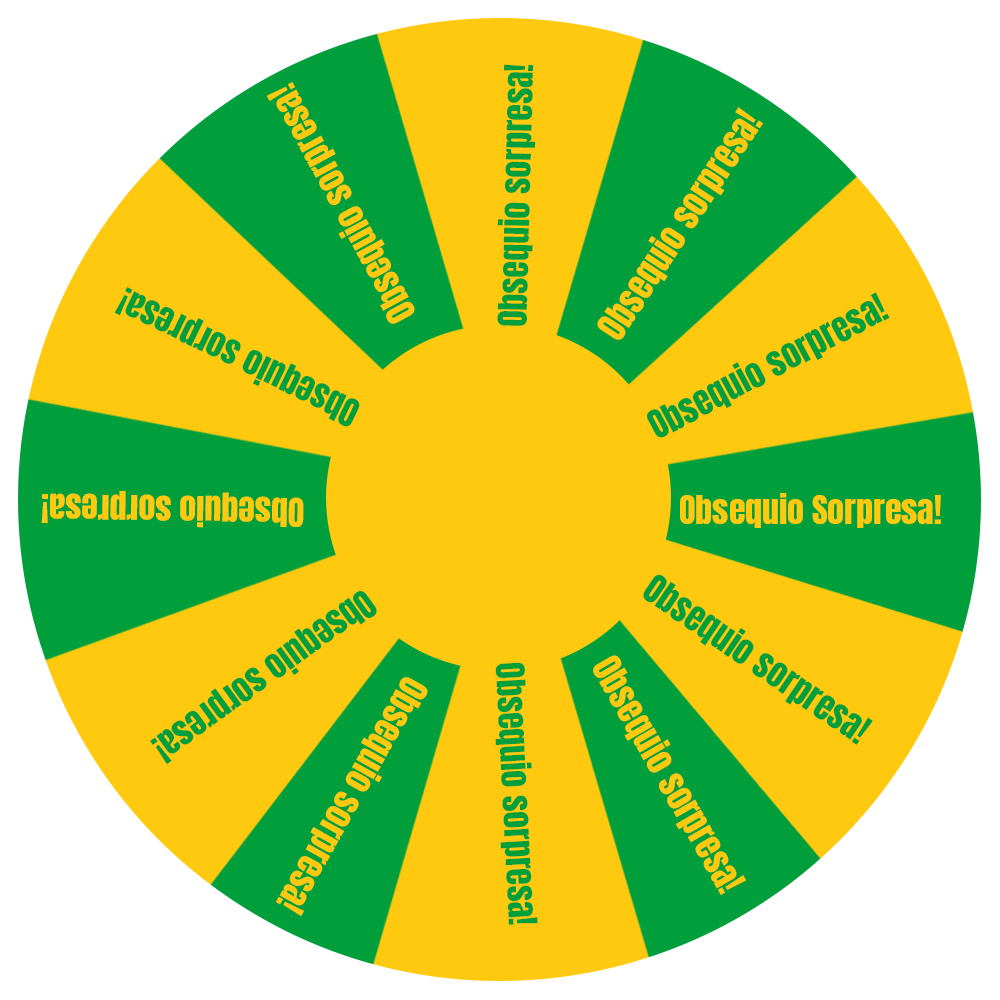
<style>
.page{position:relative;width:1000px;height:1000px;background:#ffc90f}
.page>*{position:absolute;margin:0}
.t1{font:33.6px "Anton-Regular";color:#009f3c}
.t2{font:33.8px "Anton-Regular";color:#ffc90f}
.t3{font:33.9px "Anton-Regular";color:#ffc90f}
.t4{font:33.4px "Anton-Regular";color:#009f3c}
.t5{font:33.7px "Anton-Regular";color:#009f3c}
.t6{font:33.5px "Anton-Regular";color:#009f3c}
.t7{font:33.7px "Anton-Regular";color:#ffc90f}
.t8{font:33.6px "Anton-Regular";color:#ffc90f}
</style>
<div class="page">
<p class="t1" style="left:497px;top:64px;width:39px;height:262px;rotate:-89deg">Obsequio sorpresa!</p>
<p class="t2" style="left:266px;top:82px;width:149px;height:242px;rotate:-118deg">Obsequio sorpresa!</p>
<p class="t3" style="left:597px;top:107px;width:166px;height:233px;rotate:-57deg">Obsequio sorpresa!</p>
<p class="t4" style="left:114px;top:287px;width:246px;height:140px;rotate:-154deg">Obsequio sorpresa!</p>
<p class="t5" style="left:647px;top:292px;width:243px;height:146px;rotate:-28deg">Obsequio sorpresa!</p>
<p class="t2" style="left:41px;top:490px;width:263px;height:38px;rotate:-179deg">Obsequio sorpresa!</p>
<p class="t3" style="left:680px;top:493px;width:261px;height:35px">Obsequio Sorpresa!</p>
<p class="t5" style="left:643px;top:574px;width:230px;height:171px;rotate:34deg">Obsequio sorpresa!</p>
<p class="t6" style="left:150px;top:591px;width:227px;height:174px;rotate:144deg">Obsequio sorpresa!</p>
<p class="t4" style="left:495px;top:662px;width:43px;height:263px;rotate:87deg">Obsequio sorpresa!</p>
<p class="t7" style="left:593px;top:655px;width:154px;height:240px;rotate:60deg">Obsequio sorpresa!</p>
<p class="t8" style="left:276px;top:677px;width:152px;height:239px;rotate:119deg">Obsequio sorpresa!</p>
</div>
